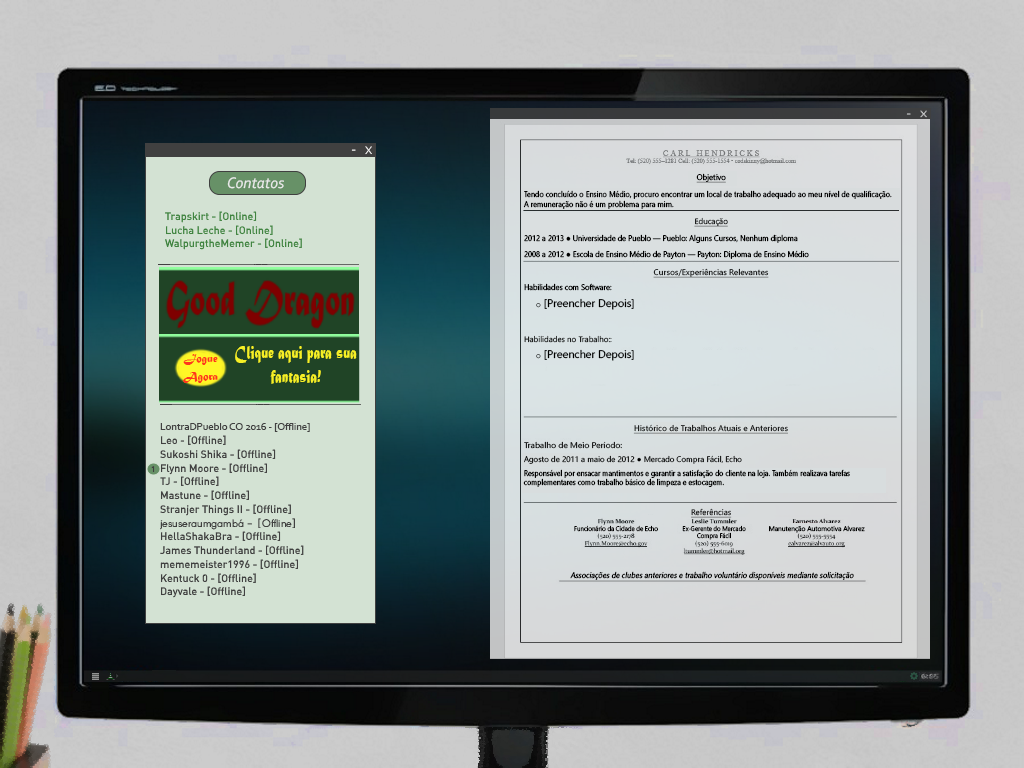
<style>
.page{position:relative;width:1024px;height:768px}
.page>*{position:absolute;margin:0}
.t1{font:8px "SegoeUI";color:#000000;text-decoration:underline;scale:0.97 1}
.t2{font:16px "Corbel-Italic";color:#eaeaea}
.t3{font:8px/14.7px "SegoeUI";color:#000000;scale:0.92 1}
.t4{font:8px "SegoeUI";text-decoration:underline}
.t5{font:8px/14.7px "SegoeUI";color:#000000;scale:0.94 1}
.t6{font:8px "SegoeUI";text-decoration:underline;scale:1.05 1}
.t7{font:8px "SegoeUI";color:#000000;scale:0.94 1}
.t8{font:10.7px "SegoeUI";color:#000000}
.t9{font:5.3px "SegoeUI";color:#000000}
.t10{font:8px "SegoeUI"}
.t11{font:18.7px/28px "MaturaMTScriptCapitals";color:#f6f025;scale:0.72 1}
.t12{font:13.3px/21.3px "MaturaMTScriptCapitals";color:#ff361d;scale:0.83 1}
.t13{font:10.7px "Corbel";color:#404040}
.t14{font:8px "SegoeUI";scale:1.06 1}
.t15{font:8px "SegoeUI";color:#000000}
.t16{font:8px/18.7px "SegoeUI";color:#000000;scale:0.88 1}
.t17{font:8px/13.3px "SegoeUI";color:#000000;scale:0.88 1}
.t18{font:10.7px "Arcon-Regular";color:#404040}
.t19{font:6.7px "SegoeUI";color:#000000;scale:0.92 1}
.t20{font:6.7px/10.7px "SegoeUI";color:#000000;scale:0.9 1}
.t21{font:6.7px "SegoeUI";color:#000000}
.t22{font:8px "SegoeUI";color:#000000;font-style:italic;scale:0.92 1}
</style>
<div class="page">
<p class="t1" style="left:696px;top:173px;width:30px;height:10px">Objetivo</p>
<p class="t2" style="left:227px;top:177px;width:57px;height:12px">Contatos</p>
<p class="t3" style="left:523px;top:190px;width:369px;height:19px">Tendo concluído o Ensino Médio, procuro encontrar um local de trabalho adequado ao meu nível de qualificação.<br>A remuneração não é um problema para mim.</p>
<p class="t4" style="left:694px;top:217px;width:34px;height:10px">Educação</p>
<p class="t5" style="left:524px;top:234px;width:285px;height:25px">2012 a 2013 ● Universidade de Pueblo — Pueblo: Alguns Cursos, Nenhum diploma<br><br>2008 a 2012 ● Escola de Ensino Médio de Payton — Payton: Diploma de Ensino Médio</p>
<p class="t6" style="left:653px;top:268px;width:116px;height:10px">Cursos/Experiências Relevantes</p>
<p class="t7" style="left:524px;top:283px;width:88px;height:8px">Habilidades com Software:</p>
<p class="t8" style="left:536px;top:298px;width:98px;height:12px"><span class="t9">○</span> [Preencher Depois]</p>
<p class="t10" style="left:524px;top:335px;width:88px;height:8px">Habilidades no Trabalho::</p>
<p class="t11" style="left:235px;top:346px;width:122px;height:38px;text-align:center">Clique aqui para sua<br>fantasia!</p>
<p class="t8" style="left:536px;top:349px;width:98px;height:12px"><span class="t9">○</span> [Preencher Depois]</p>
<p class="t12" style="left:183px;top:354px;width:35px;height:29px;text-align:center">Jogue<br>Agora</p>
<p class="t13" style="left:160px;top:423px;width:150px;height:9px">LontraDPueblo CO 2016 - [Offline]</p>
<p class="t6" style="left:633px;top:424px;width:155px;height:10px">Histórico de Trabalhos Atuais e Anteriores</p>
<p class="t14" style="left:524px;top:441px;width:98px;height:8px">Trabalho de Meio Período:</p>
<p class="t15" style="left:524px;top:455px;width:218px;height:9px">Agosto de 2011 a maio de 2012 ● Mercado Compra Fácil, Echo</p>
<p class="t16" style="left:523px;top:469px;width:327px;height:18px">Responsável por ensacar mantimentos e garantir a satisfação do cliente na loja. Também realizava tarefas<br><span class="t17">complementares como trabalho básico de limpeza e estocagem.</span></p>
<p class="t4" style="left:691px;top:508px;width:41px;height:10px">Referências</p>
<p class="t18" style="left:160px;top:518px;width:135px;height:12px">jesuseraumgambá - [Offline]</p>
<p class="t19" style="left:574px;top:525px;width:84px;height:7px">Funcionário da Cidade de Echo</p>
<p class="t20" style="left:682px;top:525px;width:64px;height:15px;text-align:center">Ex-Gerente do Mercado<br>Compra Fácil</p>
<p class="t21" style="left:769px;top:525px;width:96px;height:8px">Manutenção Automotiva Alvarez</p>
<p class="t22" style="left:570px;top:571px;width:284px;height:9px">Associações de clubes anteriores e trabalho voluntário disponíveis mediante solicitação</p>
</div>
